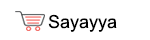
<style>
.page{position:relative;width:150px;height:40px;background:#ffffff}
.page>*{position:absolute;margin:0}
.t1{font:18px "ArialMT";color:#000000}
</style>
<div class="page">
<p class="t1" style="left:48px;top:14px;width:69px;height:18px">Sayayya</p>
</div>
